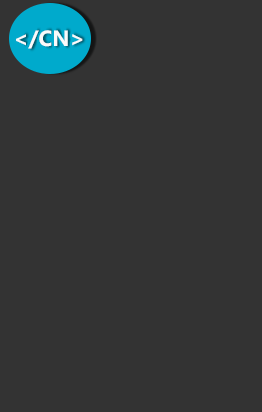
<style>
.page{position:relative;width:262px;height:412px;background:#333333}
.page>*{position:absolute;margin:0}
.t1{font:22px "Gadugi-Bold";color:#fafafa;text-transform:uppercase}
</style>
<div class="page">
<p class="t1" style="left:16px;top:30px;width:67px;height:19px">&lt;/CN&gt;</p>
</div>
